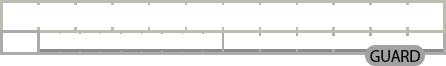
<style>
.page{position:relative;width:446px;height:66px;background:#ffffff}
.page>*{position:absolute;margin:0}
.t1{font:16.5px "MyriadPro-Regular";color:#000000}
</style>
<div class="page">
<p class="t1" style="left:370px;top:50px;width:50px;height:12px">GUARD</p>
</div>
